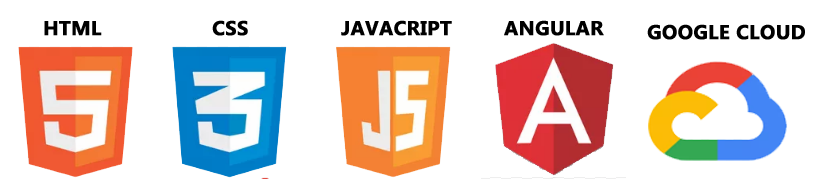
<style>
.page{position:relative;width:825px;height:179px;background:#ffffff}
.page>*{position:absolute;margin:0}
.t1{font:20px "MyanmarText-Bold";color:#000000;font-weight:bold}
</style>
<div class="page">
<p class="t1" style="left:44px;top:21px;width:58px;height:15px">HTML</p>
<p class="t1" style="left:212px;top:20px;width:36px;height:16px">CSS</p>
<p class="t1" style="left:341px;top:20px;width:111px;height:16px">JAVACRIPT</p>
<p class="t1" style="left:504px;top:20px;width:100px;height:16px">ANGULAR</p>
<p class="t1" style="left:647px;top:24px;width:158px;height:16px">GOOGLE CLOUD</p>
</div>
